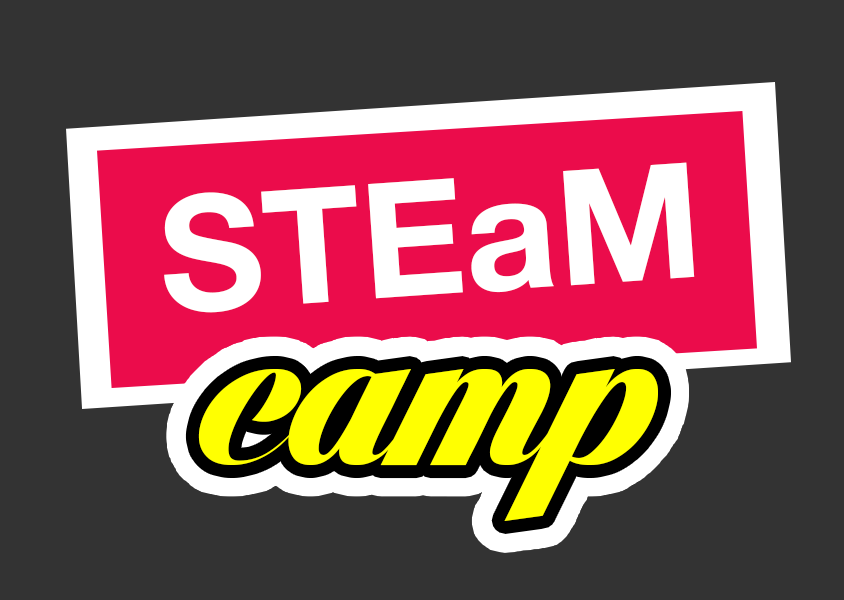
<style>
.page{position:relative;width:844px;height:600px;background:#333333}
.page>*{position:absolute;margin:0}
.t1{font:160.2px "HelveticaNeueLTStd-Bd";color:#ffffff}
.t2{font:240.5px "LighthousePersonalUse";color:#ffff01}
</style>
<div class="page">
<p class="t1" style="left:164px;top:162px;width:531px;height:151px;rotate:-4deg">STEaM</p>
<p class="t2" style="left:198px;top:369px;width:460px;height:152px">camp</p>
</div>
